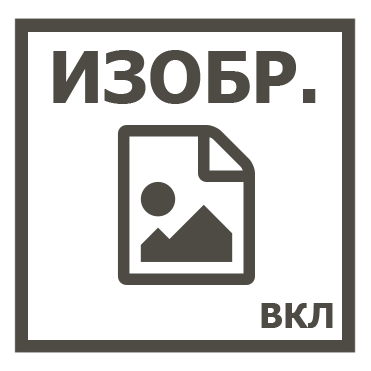
<style>
.page{position:relative;width:371px;height:371px;background:#ffffff}
.page>*{position:absolute;margin:0}
.t1{font:70.8px "Tahoma-Bold";color:#4d4b43}
.t2{font:35px "Tahoma-Bold";color:#4d4b43}
</style>
<div class="page">
<p class="t1" style="left:53px;top:50px;width:263px;height:54px">ИЗОБР.</p>
<p class="t2" style="left:261px;top:303px;width:72px;height:25px">ВКЛ</p>
</div>
